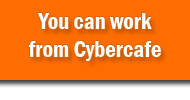
<style>
.page{position:relative;width:190px;height:100px;background:#ff6d00}
.page>*{position:absolute;margin:0}
.t1{font:23px "FranklinGothic-DemiCond";color:#ffffff}
</style>
<div class="page">
<p class="t1" style="left:28px;top:13px;width:133px;height:48px;text-align:center">You can work <br>from Cybercafe</p>
</div>
